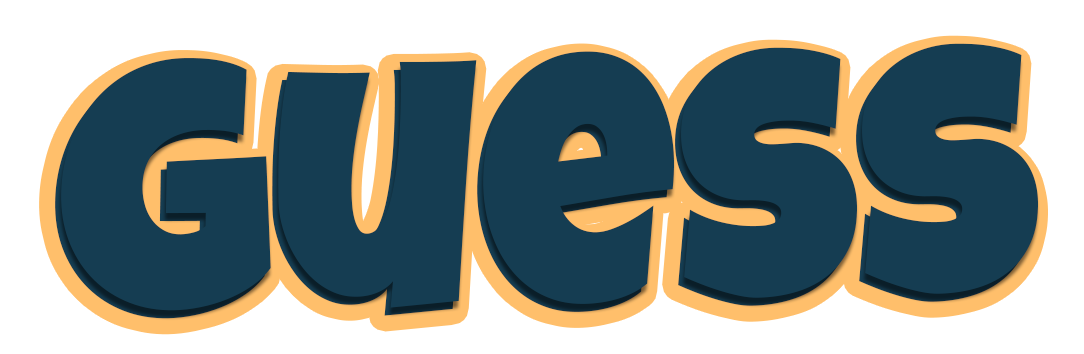
<style>
.page{position:relative;width:1084px;height:354px;background:#153d52}
.page>*{position:absolute;margin:0}
.t1{font:350.8px "LuckiestGuy-Regular";color:#153d52}
</style>
<div class="page">
<p class="t1" style="left:55px;top:51px;width:977px;height:268px;rotate:-1deg">guess</p>
<p class="t1" style="left:61px;top:43px;width:977px;height:268px;rotate:-1deg">guess</p>
</div>
